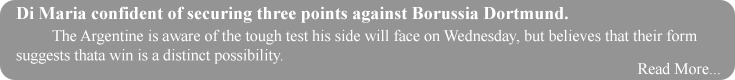
<style>
.page{position:relative;width:735px;height:80px;background:#949494}
.page>*{position:absolute;margin:0}
.t1{font:18px "TimesNewRomanPS-BoldMT";color:#ffffff}
.t2{font:16px "TimesNewRomanPSMT";color:#ffffff}
</style>
<div class="page">
<p class="t1" style="left:16px;top:6px;width:552px;height:17px">Di Maria confident of securing three points against Borussia Dortmund.</p>
<p class="t2" style="left:16px;top:29px;width:681px;height:35px">The Argentine is aware of the tough test his side will face on Wednesday, but believes that their form <br>suggests thata win is a distinct possibility.</p>
<p class="t2" style="left:637px;top:62px;width:83px;height:13px">Read More...</p>
</div>
